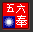
<style>
.page{position:relative;width:33px;height:32px;background:#f20000}
.page>*{position:absolute;margin:0}
.t1{font:10.4px "SimSun";color:#ffffff}
.t2{font:11.7px "SimSun";color:#ffffff}
</style>
<div class="page">
<p class="t1" style="left:7px;top:4px;width:18px;height:9px">五六</p>
<p class="t2" style="left:16px;top:15px;width:11px;height:12px">奉</p>
</div>
